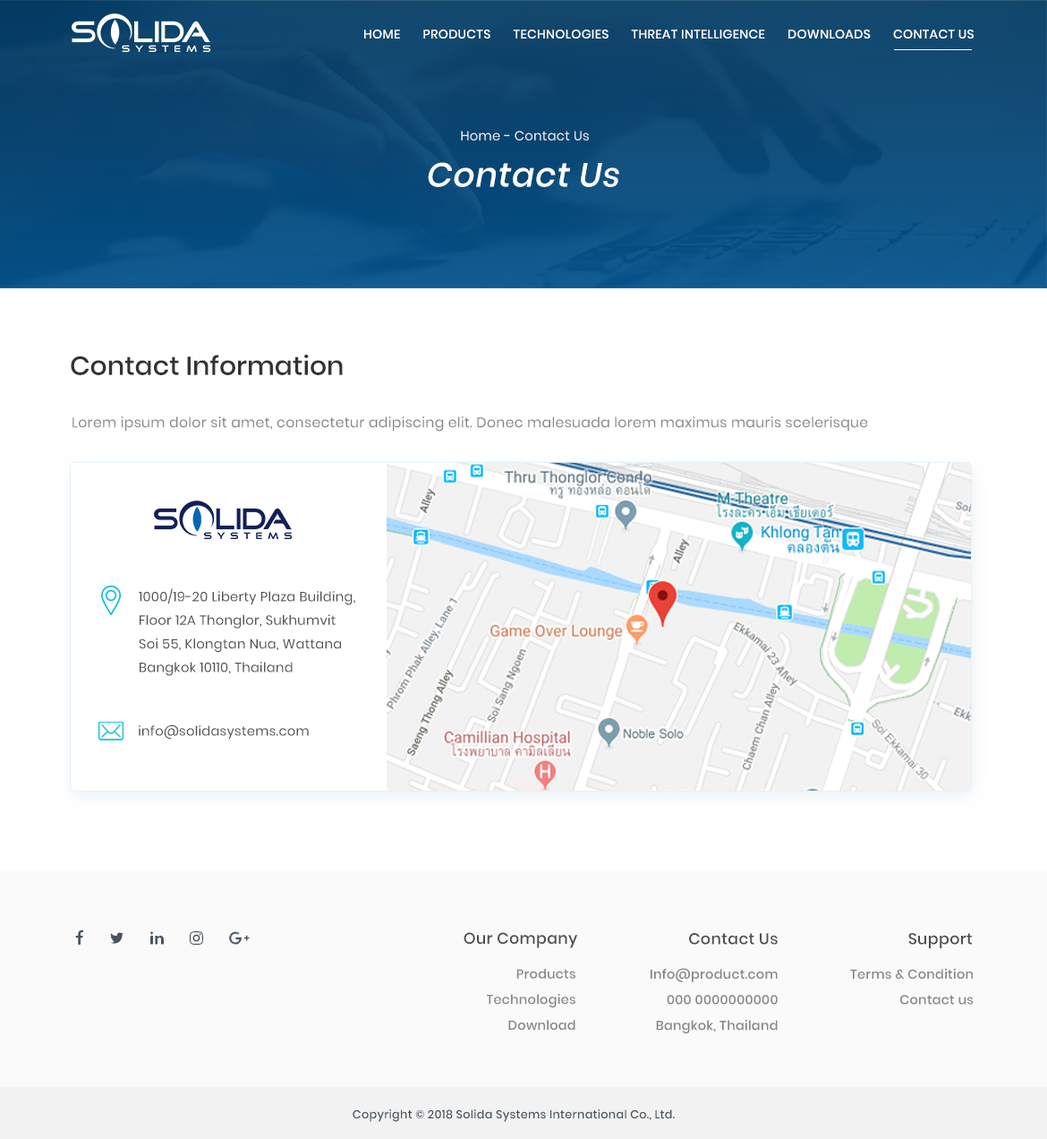
<style>
.page{position:relative;width:1047px;height:1139px;background:#ffffff}
.page>*{position:absolute;margin:0}
.t1{font:12.5px "Poppins-Medium";letter-spacing:0.02em;color:#ffffff;text-transform:uppercase}
.t2{font:13.1px "Poppins-Regular";letter-spacing:0.02em;color:#e7e6e6}
.t3{font:33.7px "Poppins-Medium";letter-spacing:0.02em;color:#ffffff;font-style:italic}
.t4{font:26.1px "Poppins-Medium";color:#333333}
.t5{font:14.1px "Poppins-Regular";letter-spacing:0.02em;color:#868686}
.t6{font:13.2px/23.6px "Poppins-Regular";letter-spacing:0.02em;color:#535252}
.t7{font:13.2px "Poppins-Regular";letter-spacing:0.02em;color:#535252}
.t8{font:15.6px "Poppins-Medium";letter-spacing:0.02em;color:#4e4e4e}
.t9{font:13px/25.6px "Poppins-Medium";letter-spacing:0.02em;color:#868686}
.t10{font:12.9px/25.5px "Poppins-Medium";letter-spacing:0.02em;color:#868686}
.t11{font:11.6px "Poppins-Medium";letter-spacing:0.02em;color:#4b5560}
</style>
<div class="page">
<p class="t1" style="left:364px;top:30px;width:610px;height:8px">HOME       PRODUCTS       TECHNOLOGIES       THREAT INTELLIGENCE       DOWNLOADS       CONTACT US</p>
<p class="t2" style="left:461px;top:131px;width:128px;height:10px">Home - Contact Us</p>
<p class="t3" style="left:428px;top:162px;width:191px;height:25px">Contact Us</p>
<p class="t4" style="left:71px;top:354px;width:272px;height:21px">Contact Information</p>
<p class="t5" style="left:73px;top:416px;width:795px;height:15px">Lorem ipsum dolor sit amet, consectetur adipiscing elit. Donec malesuada lorem maximus mauris scelerisque</p>
<p class="t6" style="left:139px;top:588px;width:216px;height:88px">1000/19-20 Liberty Plaza Building, <br>Floor 12A Thonglor, Sukhumvit<br>Soi 55, Klongtan Nua, Wattana <br>Bangkok 10110, Thailand</p>
<p class="t7" style="left:139px;top:724px;width:170px;height:15px">info@solidasystems.com</p>
<p class="t8" style="left:464px;top:932px;width:113px;height:16px">Our Company</p>
<p class="t8" style="left:689px;top:933px;width:89px;height:11px">Contact Us</p>
<p class="t8" style="left:909px;top:933px;width:63px;height:15px">Support</p>
<p class="t9" style="left:486px;top:969px;width:90px;height:60px;text-align:right">Products<br>Technologies<br>Download</p>
<p class="t10" style="left:651px;top:968px;width:127px;height:66px;text-align:right">Info@product.com<br>000 0000000000<br>Bangkok, Thailand</p>
<p class="t10" style="left:850px;top:968px;width:124px;height:36px;text-align:right">Terms &amp; Condition<br>Contact us</p>
<p class="t11" style="left:353px;top:1109px;width:322px;height:13px">Copyright © 2018 Solida Systems International Co., Ltd.</p>
</div>
